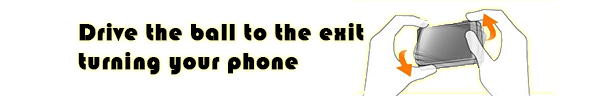
<style>
.page{position:relative;width:600px;height:96px;background:#ffffff}
.page>*{position:absolute;margin:0}
.t1{font:24px "Bauhaus93";letter-spacing:0.02em;color:#000000;font-weight:bold}
</style>
<div class="page">
<p class="t1" style="left:78px;top:23px;width:286px;height:52px">Drive the ball to the exit <br>turning your phone</p>
</div>
